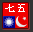
<style>
.page{position:relative;width:33px;height:32px;background:#f20000}
.page>*{position:absolute;margin:0}
.t1{font:10.4px "SimSun";color:#ffffff}
</style>
<div class="page">
<p class="t1" style="left:5px;top:4px;width:20px;height:8px">七五</p>
</div>
